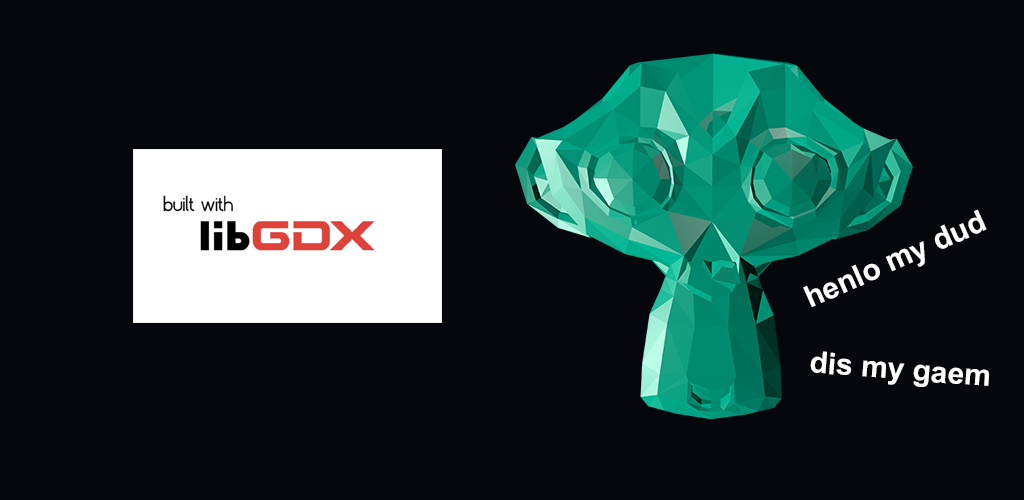
<style>
.page{position:relative;width:1024px;height:500px;background:#06060d}
.page>*{position:absolute;margin:0}
.t1{font:30px "Arial-BoldMT";color:#ffffff}
</style>
<div class="page">
<p class="t1" style="left:803px;top:209px;width:184px;height:99px;rotate:-24deg">henlo my dud</p>
<p class="t1" style="left:810px;top:351px;width:179px;height:36px;rotate:4deg">dis my gaem</p>
</div>
